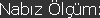
<style>
.page{position:relative;width:100px;height:18px;background:#333333}
.page>*{position:absolute;margin:0}
.t1{font:16px "Verdana";letter-spacing:-0.03em;color:#ffffff}
</style>
<div class="page">
<p class="t1" style="left:0px;top:0px;width:100px;height:18px">Nabız Ölçüm:</p>
</div>
